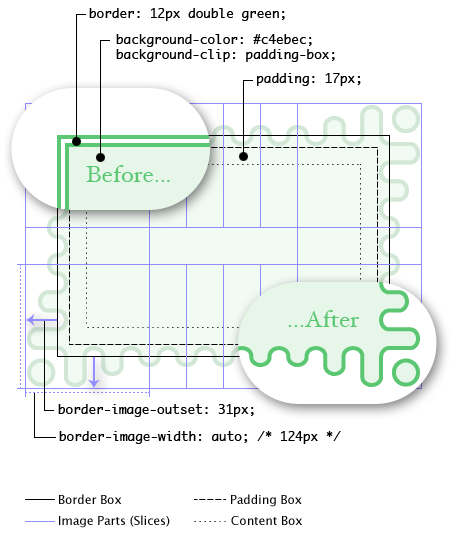
<style>
.page{position:relative;width:452px;height:537px;background:#ffffff}
.page>*{position:absolute;margin:0}
.t1{font:12.7px "Monaco";color:#000000}
.t2{font:24px "HoeflerText-Regular";color:#5cc772}
.t3{font:12px "LucidaGrande";color:#000000}
</style>
<div class="page">
<p class="t1" style="left:89px;top:8px;width:196px;height:13px">border: 12px double green;</p>
<p class="t1" style="left:116px;top:34px;width:219px;height:28px">background-color: #c4ebec;<br>background-clip: padding-box;</p>
<p class="t1" style="left:257px;top:73px;width:104px;height:13px">padding: 17px;</p>
<p class="t2" style="left:86px;top:165px;width:84px;height:17px">Before...</p>
<p class="t2" style="left:288px;top:310px;width:71px;height:17px">...After</p>
<p class="t1" style="left:58px;top:404px;width:196px;height:13px">border-image-outset: 31px;</p>
<p class="t1" style="left:59px;top:431px;width:282px;height:13px">border-image-width: auto; /* 124px */</p>
<p class="t3" style="left:59px;top:494px;width:63px;height:10px">Border Box</p>
<p class="t3" style="left:231px;top:494px;width:71px;height:13px">Padding Box</p>
<p class="t3" style="left:59px;top:515px;width:111px;height:13px">Image Parts (Slices)</p>
<p class="t3" style="left:231px;top:516px;width:71px;height:9px">Content Box</p>
</div>
